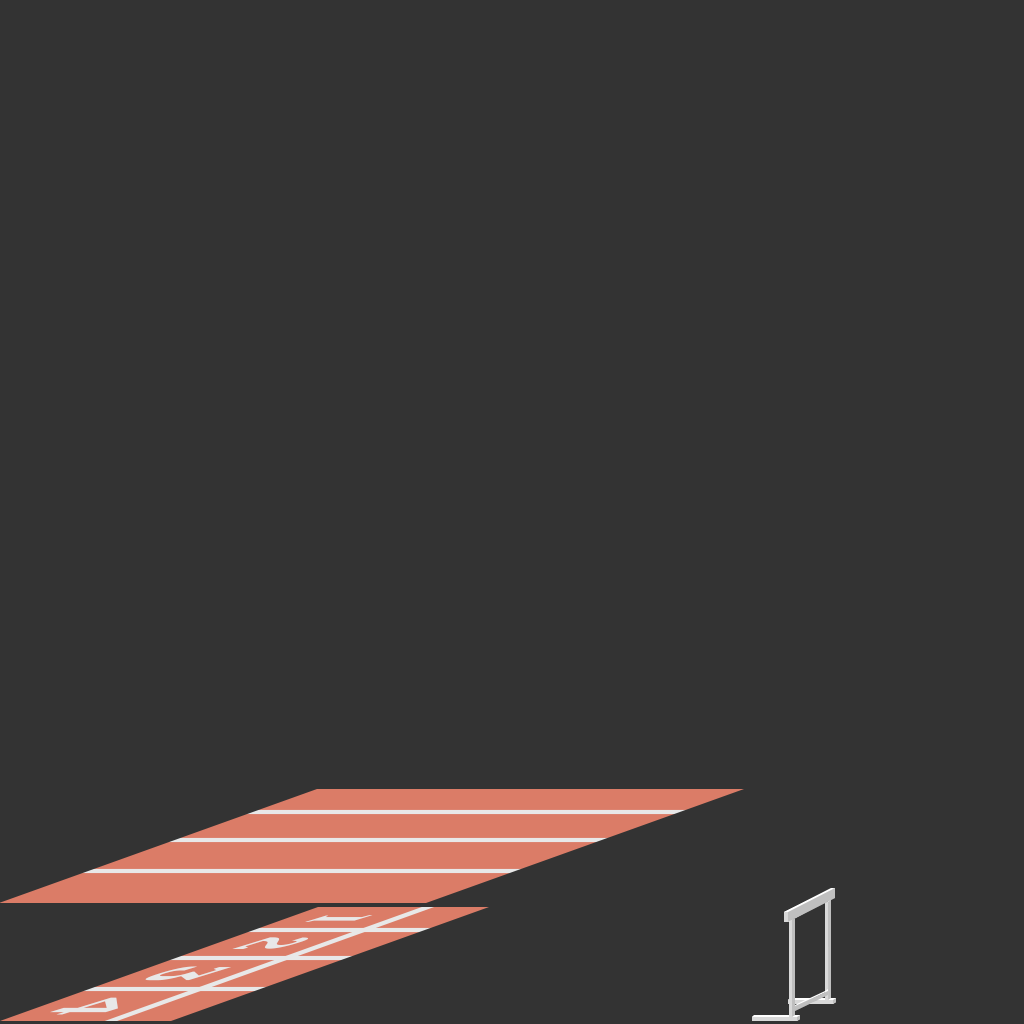
<style>
.page{position:relative;width:1024px;height:1024px;background:#333333}
.page>*{position:absolute;margin:0}
.t1{font:63.4px "HaginCapsMedium";color:#e8e8e8;scale:1.84 1}
.t2{font:71.4px "HaginCapsMedium";color:#e8e8e8;scale:1.84 1}
.t3{font:79.3px "HaginCapsMedium";color:#e8e8e8;scale:1.84 1}
</style>
<div class="page">
<p class="t1" style="left:305px;top:915px;width:68px;height:7px;rotate:163deg">1</p>
<p class="t1" style="left:232px;top:937px;width:77px;height:12px;rotate:163deg">2</p>
<p class="t2" style="left:145px;top:966px;width:86px;height:15px;rotate:163deg">3</p>
<p class="t3" style="left:50px;top:997px;width:68px;height:18px;rotate:163deg">4</p>
</div>
